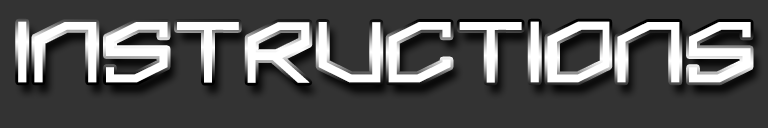
<style>
.page{position:relative;width:768px;height:128px;background:#333333}
.page>*{position:absolute;margin:0}
.t1{font:86px "KinineAlpha";color:#ffffff}
</style>
<div class="page">
<p class="t1" style="left:18px;top:21px;width:733px;height:62px">InstructionS</p>
</div>
